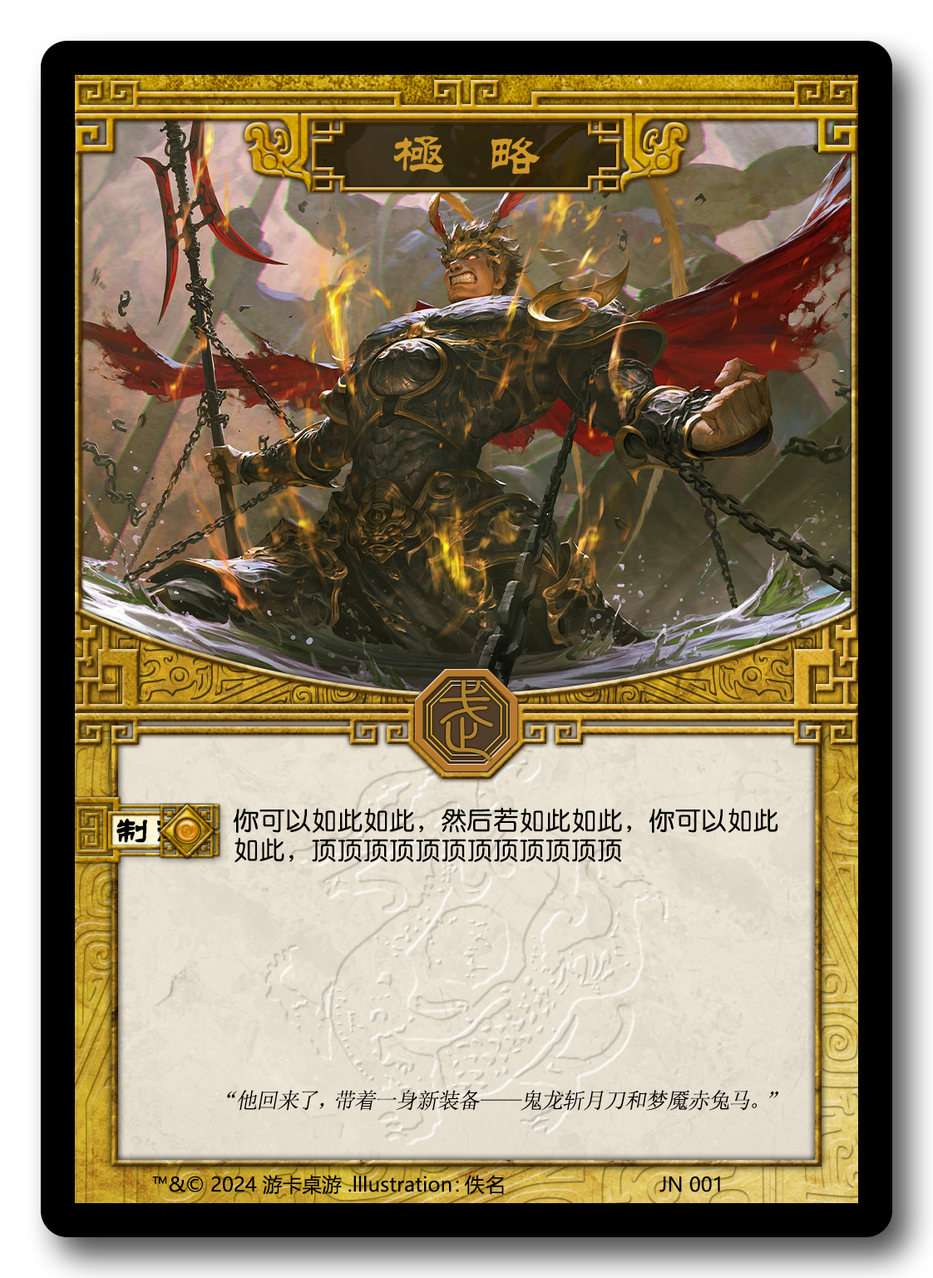
<style>
.page{position:relative;width:933px;height:1278px}
.page>*{position:absolute;margin:0}
.t1{font:55.5px "FZL2FW--GB1-0";letter-spacing:0.7em;color:#ce972a}
.t2{font:87.1px "FZuanSu";color:#b0832e;scale:1.2 1}
.t3{font:26px/29.5px "HYe3gj";color:#0b0306}
.t4{font:34.7px "FZL2FW--GB1-0";letter-spacing:0.15em;font-weight:bold}
.t5{font:21.8px "SimSun";letter-spacing:-0.025em;color:#000000;font-style:italic}
.t6{font:19.8px "MicrosoftYaHei";color:#000000}
.t7{font:19.8px "MicrosoftYaHei";letter-spacing:0.08em;color:#000000}
</style>
<div class="page">
<p class="t1" style="left:393px;top:136px;width:147px;height:38px">极略</p>
<p class="t2" style="left:439px;top:680px;width:54px;height:80px">武</p>
<p class="t3" style="left:233px;top:807px;width:546px;height:56px">你可以如此如此，然后若如此如此，你可以如此<br>如此，顶顶顶顶顶顶顶顶顶顶顶顶</p>
<p class="t4" style="left:116px;top:819px;width:74px;height:24px">制衡</p>
<p class="t5" style="left:227px;top:1089px;width:552px;height:21px">“他回来了，带着一身新装备——鬼龙斩月刀和梦魇赤兔马。”</p>
<p class="t6" style="left:152px;top:1175px;width:307px;height:19px">™&amp;© 2024 游卡桌游 .lllustration：</p>
<p class="t7" style="left:464px;top:1175px;width:40px;height:19px">佚名</p>
<p class="t6" style="left:660px;top:1175px;width:60px;height:17px">JN 001</p>
</div>
